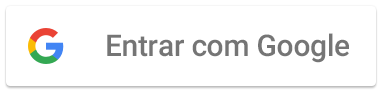
<style>
.page{position:relative;width:382px;height:92px;background:#ffffff}
.page>*{position:absolute;margin:0}
.t1{font:30px "Roboto-Medium";letter-spacing:-0.01em;color:#757575}
</style>
<div class="page">
<p class="t1" style="left:107px;top:33px;width:242px;height:30px">Entrar com Google</p>
</div>
